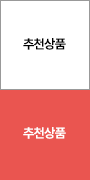
<style>
.page{position:relative;width:90px;height:180px;background:#ea5550}
.page>*{position:absolute;margin:0}
.t1{font:13px "Pretendard-Bold";letter-spacing:-0.05em;color:#010101}
.t2{font:13px "Pretendard-Bold";letter-spacing:-0.05em;color:#ffffff}
</style>
<div class="page">
<p class="t1" style="left:23px;top:38px;width:43px;height:12px">추천상품</p>
<p class="t2" style="left:23px;top:127px;width:43px;height:12px">추천상품</p>
</div>
